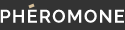
<style>
.page{position:relative;width:125px;height:30px;background:#333333}
.page>*{position:absolute;margin:0}
.t1{font:18px "Raleway-SemiBold";letter-spacing:0.075em;color:#ffffff;text-transform:uppercase}
</style>
<div class="page">
<p class="t1" style="left:0px;top:9px;width:124px;height:14px">pheromone</p>
</div>
